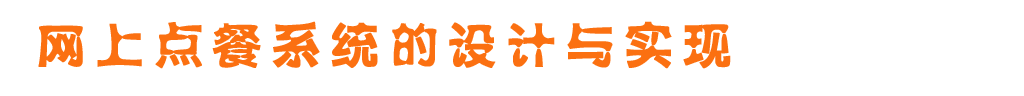
<style>
.page{position:relative;width:1024px;height:96px;background:#ffffff}
.page>*{position:absolute;margin:0}
.t1{font:48px "FZSHHJW--GB1-0";letter-spacing:0.2em;color:#fb7011;font-weight:bold}
</style>
<div class="page">
<p class="t1" style="left:38px;top:21px;width:693px;height:48px">网上点餐系统的设计与实现</p>
</div>
